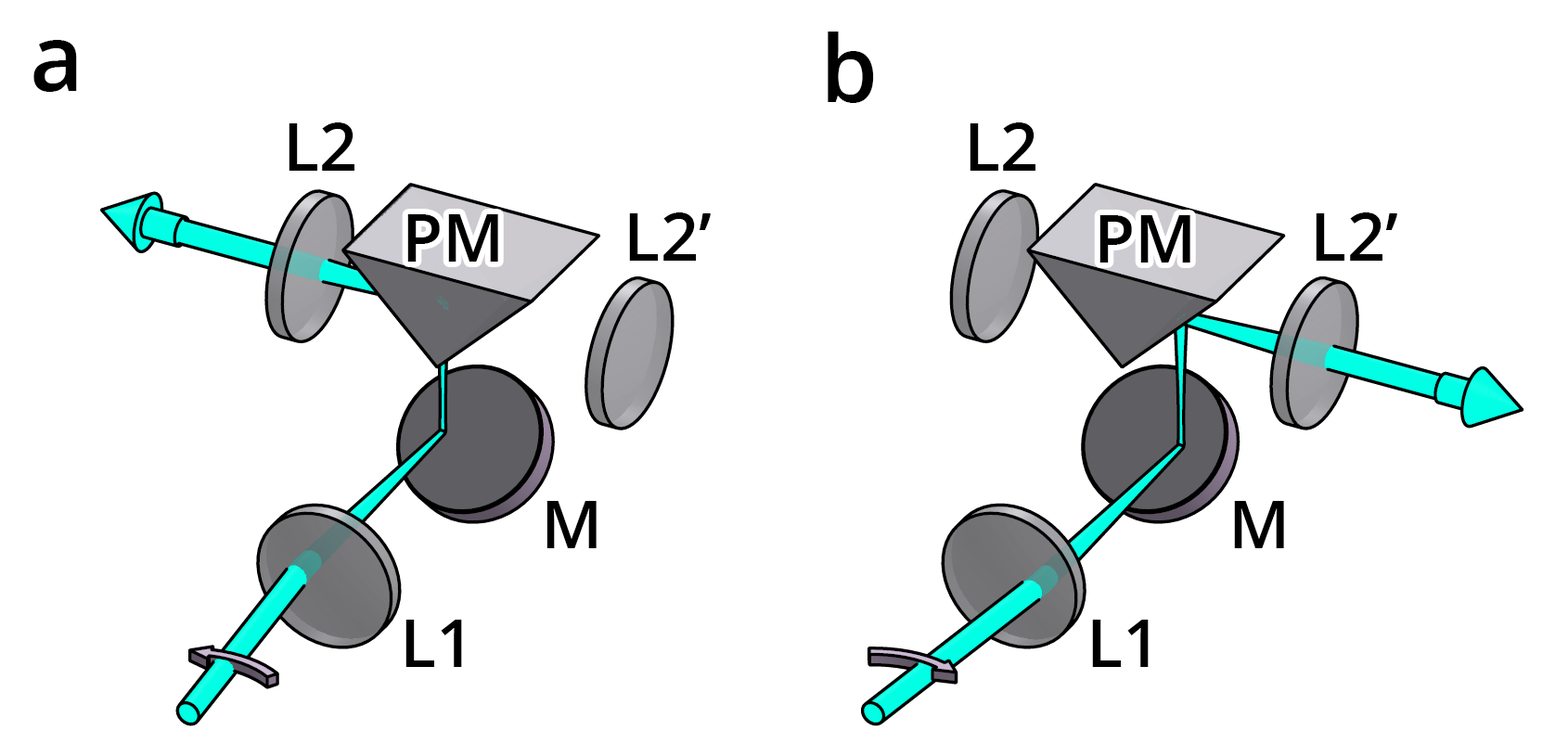
<style>
.page{position:relative;width:1568px;height:756px;background:#ffffff}
.page>*{position:absolute;margin:0}
.t1{font:92.8px "OpenSans-Semibold";color:#000000}
.t2{font:66.8px "OpenSans-Semibold";color:#000000}
</style>
<div class="page">
<p class="t1" style="left:33px;top:40px;width:44px;height:52px">a</p>
<p class="t1" style="left:828px;top:32px;width:46px;height:71px">b</p>
<p class="t2" style="left:289px;top:122px;width:65px;height:49px">L2</p>
<p class="t2" style="left:970px;top:122px;width:65px;height:49px">L2</p>
<p class="t2" style="left:407px;top:214px;width:91px;height:48px">PM</p>
<p class="t2" style="left:629px;top:212px;width:82px;height:49px">L2’</p>
<p class="t2" style="left:1099px;top:215px;width:91px;height:48px">PM</p>
<p class="t2" style="left:1316px;top:212px;width:81px;height:49px">L2’</p>
<p class="t2" style="left:546px;top:501px;width:51px;height:47px">M</p>
<p class="t2" style="left:1234px;top:501px;width:50px;height:47px">M</p>
<p class="t2" style="left:405px;top:620px;width:57px;height:47px">L1</p>
<p class="t2" style="left:1092px;top:620px;width:57px;height:47px">L1</p>
</div>
